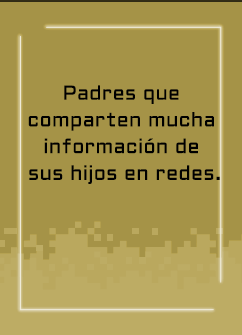
<style>
.page{position:relative;width:242px;height:335px;background:#a59347}
.page>*{position:absolute;margin:0}
.t1{font:20px/26.7px "Aldrich-Regular";letter-spacing:0.015em;color:#000000}
</style>
<div class="page">
<p class="t1" style="left:28px;top:85px;width:192px;height:99px;text-align:center">Padres que <br>comparten mucha <br>información de <br>sus hijos en redes.</p>
</div>
